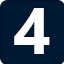
<style>
.page{position:relative;width:64px;height:64px;background:#001933}
.page>*{position:absolute;margin:0}
.t1{font:65.6px "LeelawadeeUI-Bold";color:#ffffff}
</style>
<div class="page">
<p class="t1" style="left:14px;top:8px;width:36px;height:46px">4</p>
</div>
